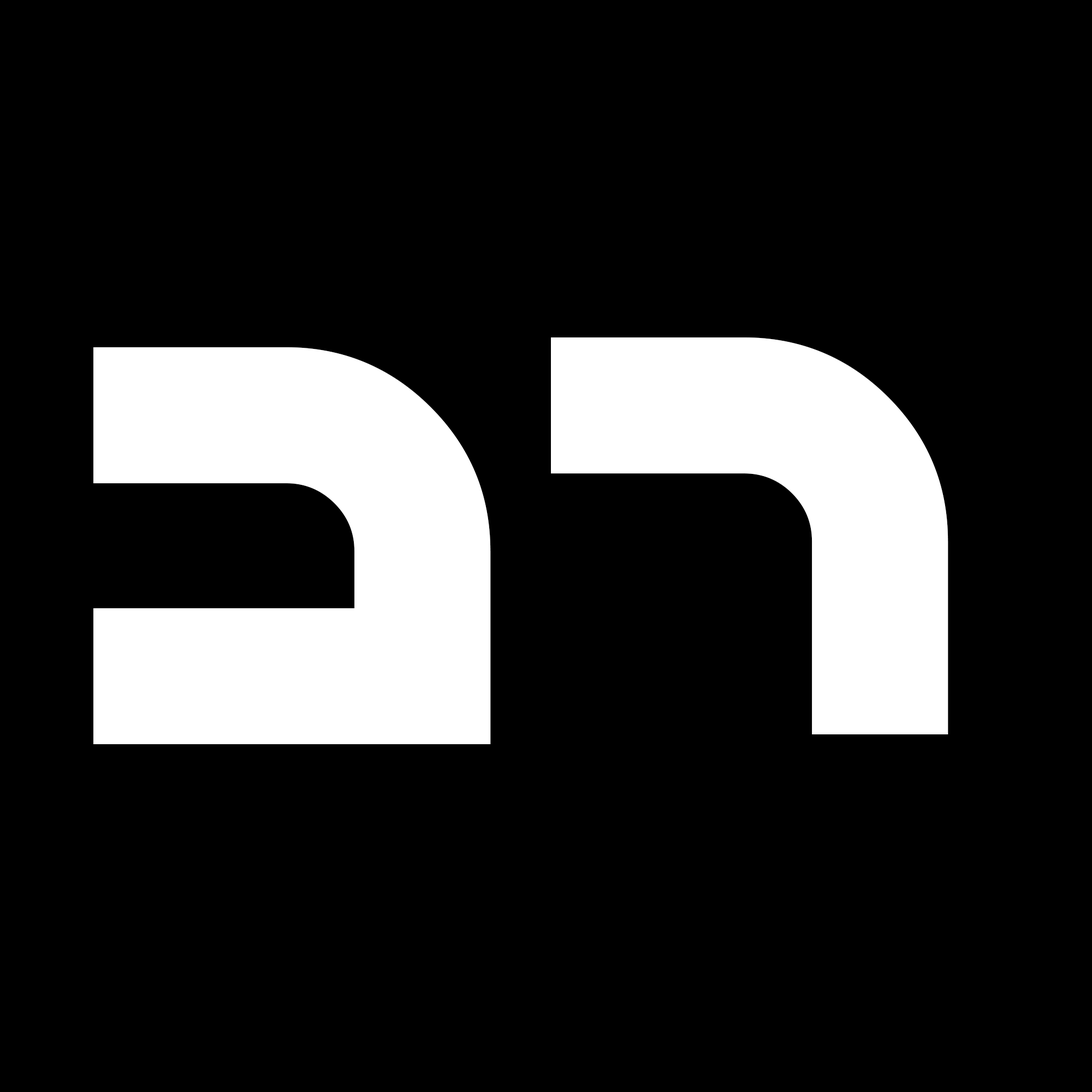
<style>
.page{position:relative;width:1092px;height:1092px;background:#000000}
.page>*{position:absolute;margin:0}
.t1{font:637px "Eco";color:#ffffff}
</style>
<div class="page">
<p class="t1" style="left:551px;top:337px;width:397px;height:397px;rotate:180deg">L</p>
<p class="t1" style="left:93px;top:347px;width:398px;height:397px;rotate:180deg">T</p>
</div>
